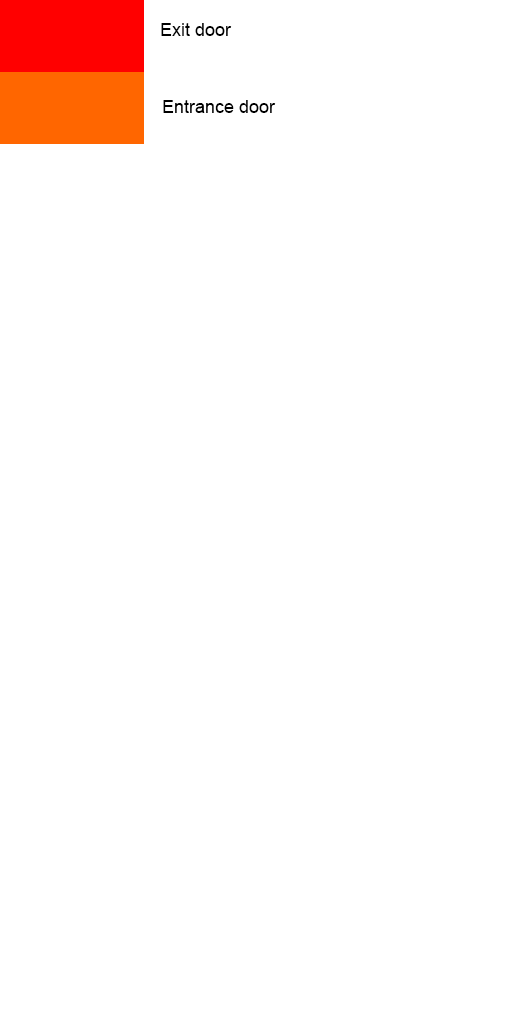
<style>
.page{position:relative;width:512px;height:1024px;background:#ffffff}
.page>*{position:absolute;margin:0}
.t1{font:18px "ArialMT";color:#000000}
</style>
<div class="page">
<p class="t1" style="left:161px;top:23px;width:71px;height:13px">Exit door</p>
<p class="t1" style="left:163px;top:100px;width:113px;height:13px">Entrance door</p>
</div>
